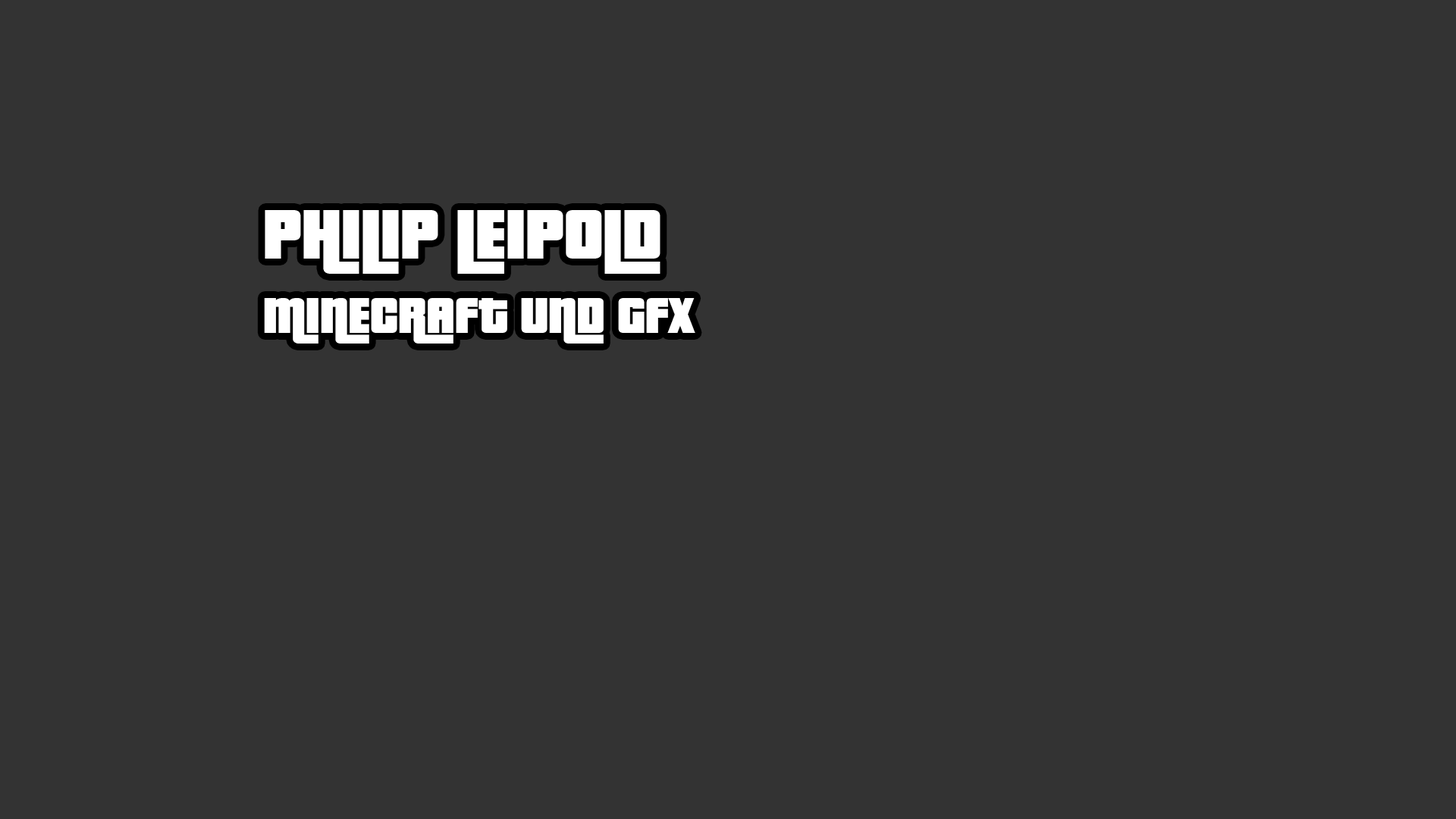
<style>
.page{position:relative;width:1456px;height:819px;background:#333333}
.page>*{position:absolute;margin:0}
.t1{font:54.6px "PricedownBl-Regular";color:#ffffff;text-transform:uppercase}
.t2{font:75.8px "PricedownBl-Regular";color:#ffffff;text-transform:uppercase}
</style>
<div class="page">
<p class="t1" style="left:264px;top:210px;width:431px;height:134px;text-align:right"><span class="t2">philip leipold<br><br></span>Minecraft und GFX</p>
</div>
